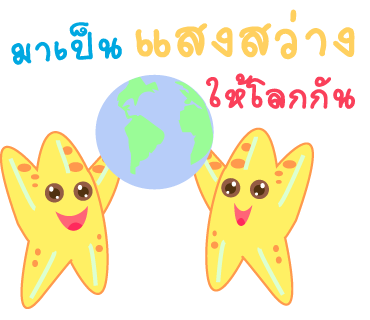
<style>
.page{position:relative;width:370px;height:320px;background:#ffffff}
.page>*{position:absolute;margin:0}
.t1{font:82px "2005_iannnnnMTV";letter-spacing:0.025em;color:#ffd05f;scale:1.06 1}
.t2{font:58px "2005_iannnnnMTV";letter-spacing:0.025em;color:#00a8e1;scale:1.06 1}
.t3{font:55px "2005_iannnnnMTV";letter-spacing:0.025em;color:#fa405a;scale:1.06 1}
</style>
<div class="page">
<p class="t1" style="left:135px;top:9px;width:220px;height:51px">แสงสว่าง</p>
<p class="t2" style="left:11px;top:22px;width:111px;height:43px;rotate:-3deg">มาเป็น</p>
<p class="t3" style="left:206px;top:73px;width:149px;height:36px">ให้โลกกัน</p>
</div>
